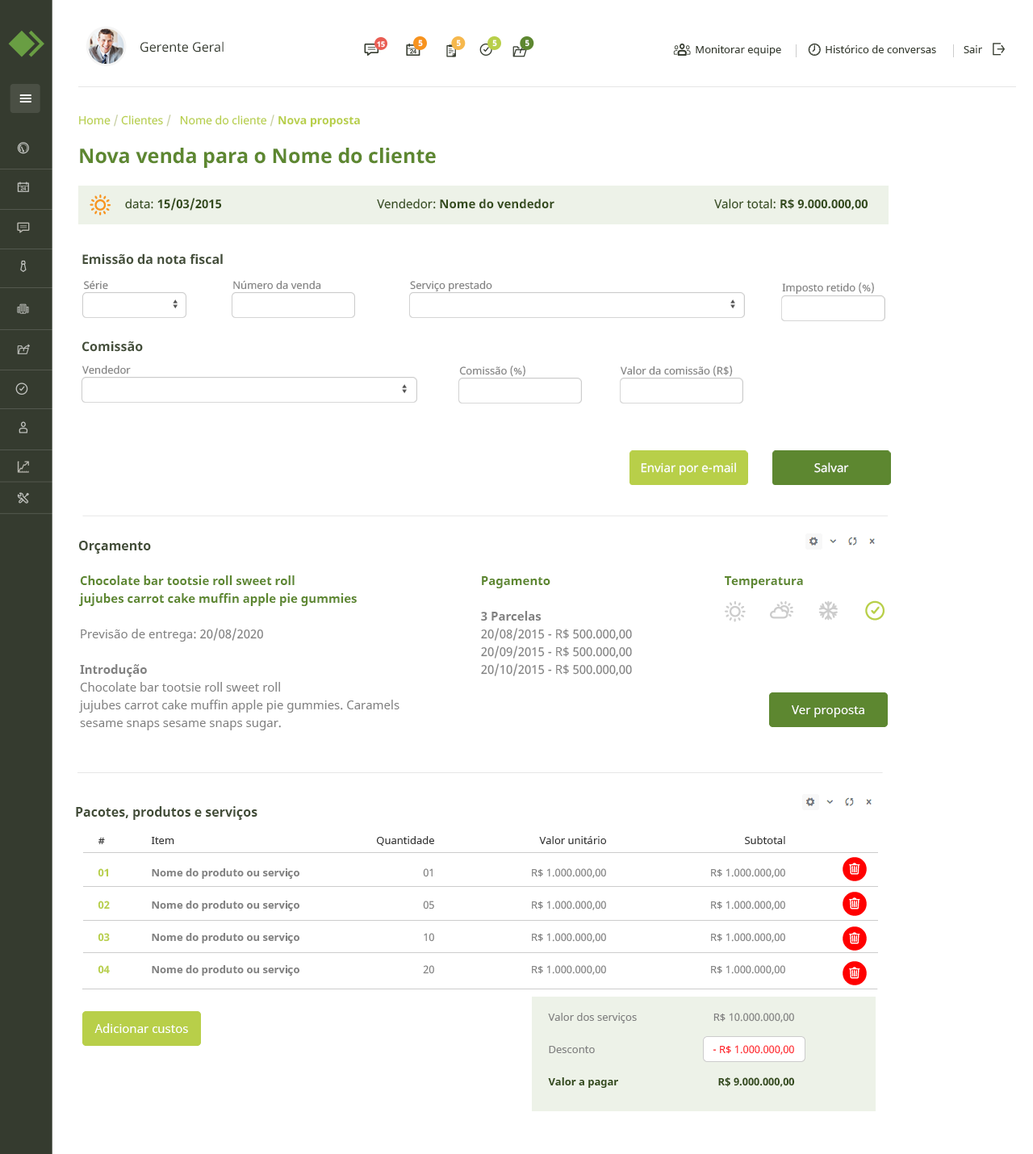
<style>
.page{position:relative;width:1033px;height:1154px;background:#ffffff}
.page>*{position:absolute;margin:0}
.t1{font:12.9px "NotoSans";color:#353b2f}
.t2{font:7.3px "NotoSans-Bold";color:#ffffff}
.t3{font:8.1px "NotoSans-Bold";color:#ffffff}
.t4{font:10.5px "NotoSans";color:#353b2f}
.t5{font:11.3px "NotoSans";color:#b8cf49}
.t6{font:11.3px "NotoSans";color:#c7cfa1}
.t7{font:11.3px "NotoSans-Bold";color:#b8cf49}
.t8{font:20.2px "NotoSans-Bold";color:#5d8730}
.t9{font:12.1px "NotoSans-Bold";color:#324a1a}
.t10{font:12.1px "NotoSans";color:#324a1a}
.t11{font:12.9px "NotoSans-Bold";color:#424d38}
.t12{font:10.5px "NotoSans";color:#808080}
.t13{font:12.1px "NotoSans";color:#ffffff}
.t14{font:12.1px/17.8px "NotoSans";color:#808080}
.t15{font:12.1px/17.8px "NotoSans-Bold";color:#5d8730}
.t16{font:12.1px/17.8px "NotoSans-Bold";color:#808080}
.t17{font:12.1px "NotoSans-Bold";color:#5d8730}
.t18{font:10.5px/32.3px "NotoSans-Bold";color:#b8cf49}
.t19{font:10.5px/32.3px "NotoSans";color:#333333}
.t20{font:10.5px/32.3px "NotoSans-Bold";color:#808080}
.t21{font:10.5px/32.3px "NotoSans";color:#808080}
.t22{font:10.5px/32.3px "NotoSans-Bold";color:#324a1a}
.t23{font:10.5px/32.3px "NotoSans";color:#ff1d25}
</style>
<div class="page">
<p class="t1" style="left:140px;top:41px;width:84px;height:11px">Gerente Geral</p>
<p class="t2" style="left:377px;top:41px;width:8px;height:7px">15</p>
<p class="t3" style="left:418px;top:40px;width:5px;height:7px">5</p>
<p class="t3" style="left:457px;top:40px;width:4px;height:7px">5</p>
<p class="t3" style="left:492px;top:40px;width:5px;height:7px">5</p>
<p class="t3" style="left:525px;top:40px;width:4px;height:7px">5</p>
<p class="t4" style="left:696px;top:45px;width:286px;height:11px">Monitorar equipe                Histórico de conversas          Sair</p>
<p class="t5" style="left:79px;top:115px;width:281px;height:13px">Home <span class="t6">/</span> Clientes <span class="t6">/</span>   Nome do cliente <span class="t6">/ </span><span class="t7">Nova proposta</span></p>
<p class="t8" style="left:80px;top:148px;width:356px;height:20px">Nova venda para o Nome do cliente</p>
<p class="t9" style="left:125px;top:198px;width:97px;height:13px"><span class="t10">data: </span>15/03/2015</p>
<p class="t9" style="left:377px;top:199px;width:177px;height:10px"><span class="t10">Vendedor: </span>Nome do vendedor</p>
<p class="t9" style="left:714px;top:199px;width:154px;height:11px"><span class="t10">Valor total: </span>R$ 9.000.000,00</p>
<p class="t11" style="left:82px;top:253px;width:141px;height:12px">Emissão da nota fiscal</p>
<p class="t12" style="left:84px;top:280px;width:24px;height:10px">Série</p>
<p class="t12" style="left:233px;top:280px;width:88px;height:10px">Número da venda</p>
<p class="t12" style="left:410px;top:280px;width:82px;height:12px">Serviço prestado</p>
<p class="t12" style="left:782px;top:282px;width:92px;height:13px">Imposto retido (%)</p>
<p class="t11" style="left:82px;top:341px;width:61px;height:11px">Comissão</p>
<p class="t12" style="left:82px;top:365px;width:49px;height:10px">Vendedor</p>
<p class="t12" style="left:459px;top:366px;width:66px;height:11px">Comissão (%)</p>
<p class="t12" style="left:621px;top:366px;width:112px;height:11px">Valor da comissão (R$)</p>
<p class="t13" style="left:641px;top:462px;width:95px;height:13px">Enviar por e-mail</p>
<p class="t13" style="left:814px;top:462px;width:35px;height:11px">Salvar</p>
<p class="t11" style="left:79px;top:541px;width:72px;height:13px">Orçamento</p>
<p class="t14" style="left:79px;top:575px;width:321px;height:155px"><span class="t15">Chocolate bar tootsie roll sweet roll<br>jujubes carrot cake muffin apple pie gummies<br></span><br>Previsão de entrega: 20/08/2020<br><span class="t16"><br>Introdução<br></span>Chocolate bar tootsie roll sweet roll<br>jujubes carrot cake muffin apple pie gummies. Caramels sesame snaps sesame snaps sugar.</p>
<p class="t14" style="left:481px;top:576px;width:151px;height:100px"><span class="t15">Pagamento<br><br></span><span class="t16">3 Parcelas<br></span>20/08/2015 - R$ 500.000,00<br>20/09/2015 - R$ 500.000,00<br>20/10/2015 - R$ 500.000,00</p>
<p class="t17" style="left:725px;top:576px;width:78px;height:12px">Temperatura</p>
<p class="t13" style="left:792px;top:705px;width:72px;height:13px">Ver proposta</p>
<p class="t11" style="left:76px;top:806px;width:181px;height:14px">Pacotes, produtos e serviços</p>
<p class="t18" style="left:98px;top:837px;width:12px;height:137px"><span class="t19">#<br></span>01<br>02<br>03<br>04</p>
<p class="t20" style="left:151px;top:837px;width:149px;height:139px"><span class="t19">Item<br></span>Nome do produto ou serviço<br>Nome do produto ou serviço<br>Nome do produto ou serviço<br>Nome do produto ou serviço</p>
<p class="t21" style="left:376px;top:836px;width:58px;height:138px;text-align:right"><span class="t19">Quantidade<br></span>01<br>05<br>10<br>20</p>
<p class="t21" style="left:532px;top:836px;width:74px;height:139px;text-align:right"><span class="t19">Valor unitário<br></span>R$ 1.000.000,00<br>R$ 1.000.000,00<br>R$ 1.000.000,00<br>R$ 1.000.000,00</p>
<p class="t21" style="left:711px;top:836px;width:74px;height:139px;text-align:right"><span class="t19">Subtotal <br></span>R$ 1.000.000,00<br>R$ 1.000.000,00<br>R$ 1.000.000,00<br>R$ 1.000.000,00</p>
<p class="t21" style="left:548px;top:1013px;width:89px;height:75px">Valor dos serviços<br>Desconto<br><span class="t22">Valor a pagar</span></p>
<p class="t23" style="left:713px;top:1013px;width:82px;height:74px;text-align:right"><span class="t21">R$ 10.000.000,00<br></span>- R$ 1.000.000,00<br><span class="t22">R$ 9.000.000,00</span></p>
<p class="t13" style="left:94px;top:1023px;width:94px;height:10px">Adicionar custos</p>
</div>
